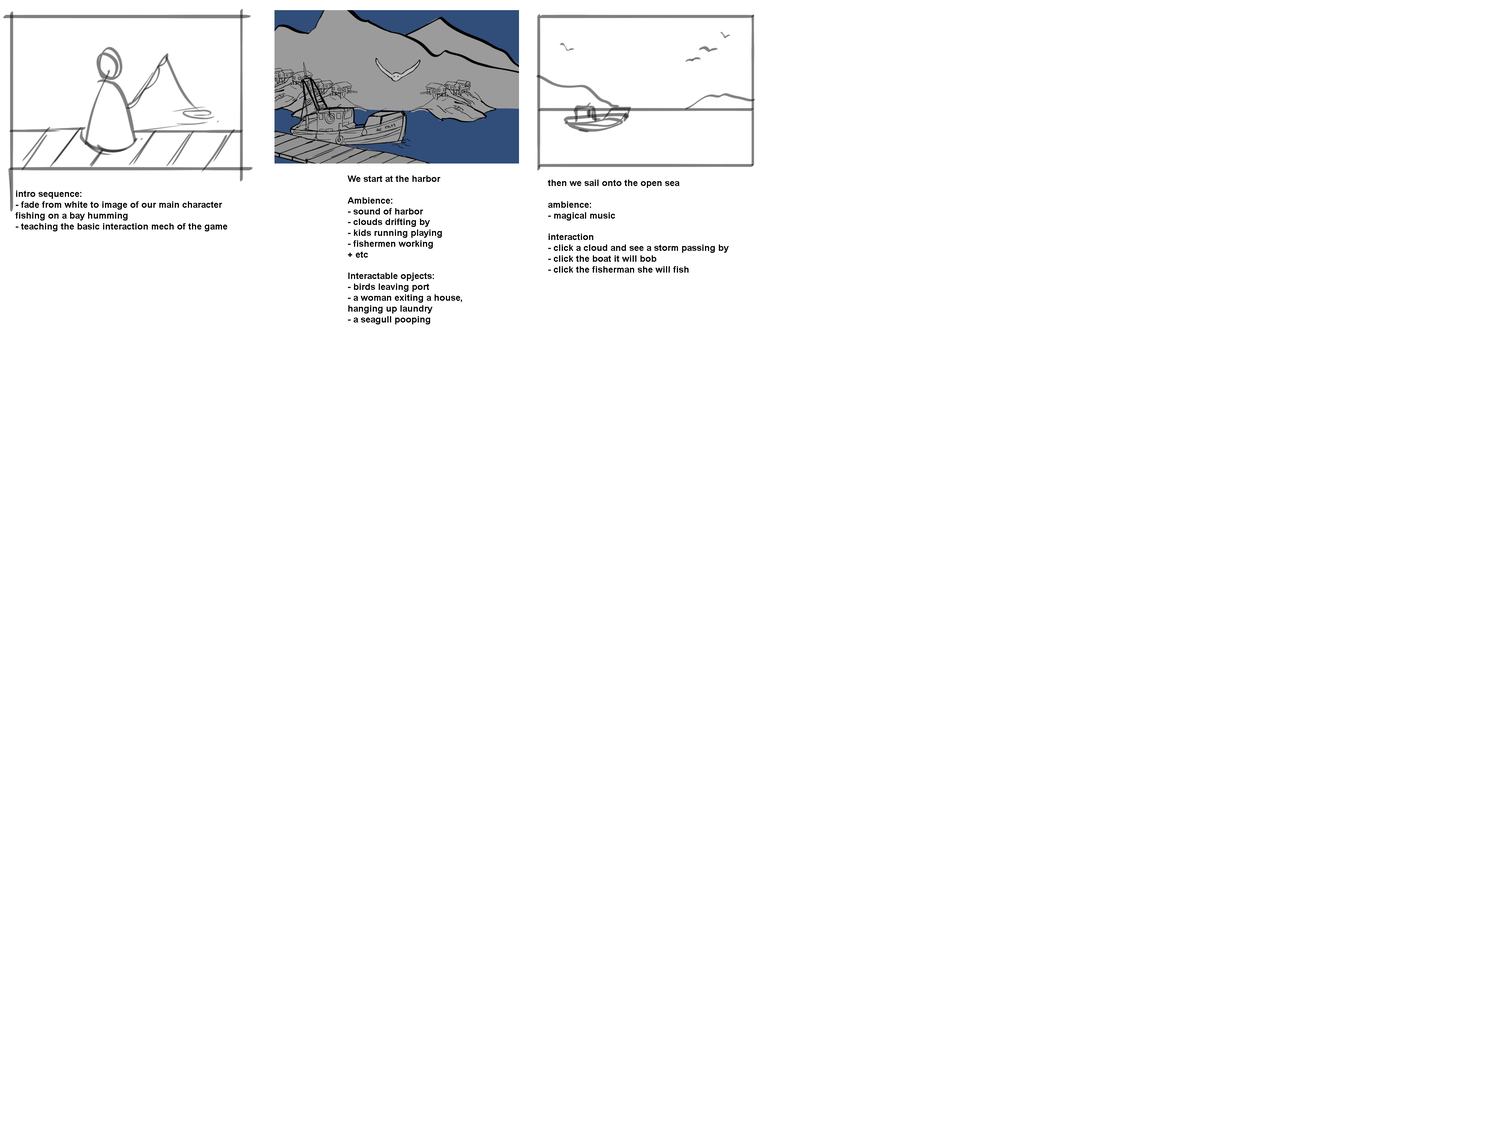
<style>
.page{position:relative;width:1500px;height:1125px;background:#ffffff}
.page>*{position:absolute;margin:0}
.t1{font:9px "Arial-BoldMT";color:#000000}
</style>
<div class="page">
<p class="t1" style="left:348px;top:176px;width:114px;height:148px">We start at the harbor<br><br>Ambience:<br>- sound of harbor<br>- clouds drifting by<br>- kids running playing<br>- fishermen working<br>+ etc<br><br>Interactable opjects:<br>- birds leaving port<br>- a woman exiting a house, <br>hanging up laundry<br>- a seagull pooping</p>
<p class="t1" style="left:548px;top:180px;width:181px;height:93px">then we sail onto the open sea<br><br>ambience:<br>- magical music<br><br>interaction<br>- click a cloud and see a storm passing by<br>- click the boat it will bob<br>- click the fisherman she will fish</p>
<p class="t1" style="left:15px;top:190px;width:212px;height:41px">intro sequence:<br>- fade from white to image of our main character fishing on a bay humming<br>- teaching the basic interaction mech of the game</p>
</div>
